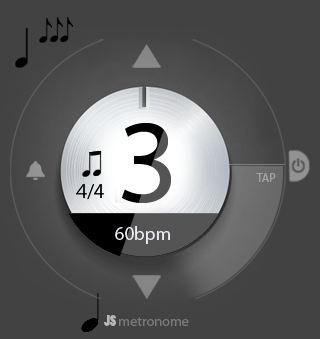
<style>
.page{position:relative;width:320px;height:339px;background:#424242}
.page>*{position:absolute;margin:0}
.t1{font:120.5px "MyriadPro-Regular"}
.t2{font:12px "MyriadPro-Regular";color:#a3a3a4}
.t3{font:20.7px "MyriadPro-Regular";color:#000000}
.t4{font:18.8px "MyriadPro-Regular";color:#ecedf3}
.t5{font:14.2px "PoplarStd";color:#b6b9bb}
.t6{font:14.2px "MyriadPro-Regular";color:#7b7b7b}
</style>
<div class="page">
<p class="t1" style="left:122px;top:123px;width:49px;height:80px">3</p>
<p class="t2" style="left:256px;top:173px;width:20px;height:9px">TAP</p>
<p class="t3" style="left:76px;top:184px;width:28px;height:16px">4/4</p>
<p class="t4" style="left:115px;top:226px;width:55px;height:18px">60bpm</p>
<p class="t5" style="left:104px;top:315px;width:12px;height:11px">JS</p>
<p class="t6" style="left:119px;top:317px;width:70px;height:9px">metronome</p>
</div>
